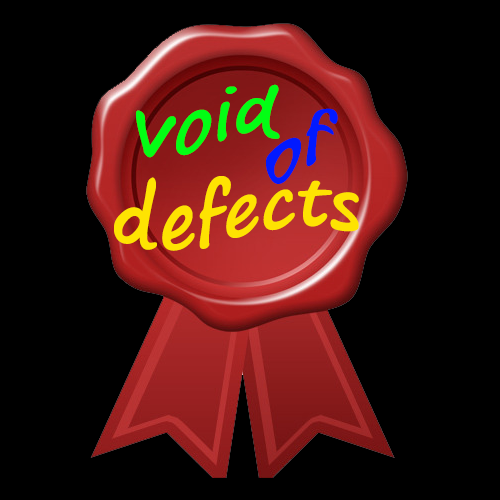
<style>
.page{position:relative;width:500px;height:500px;background:#000000}
.page>*{position:absolute;margin:0}
.t1{font:72px "SegoePrint-Bold";color:#02fe14}
.t2{font:72px "SegoePrint-Bold";color:#021afe}
.t3{font:72px "SegoePrint-Bold";color:#fee302}
</style>
<div class="page">
<p class="t1" style="left:136px;top:84px;width:144px;height:74px">void</p>
<p class="t2" style="left:266px;top:108px;width:72px;height:76px">of</p>
<p class="t3" style="left:114px;top:176px;width:245px;height:75px">defects</p>
</div>
